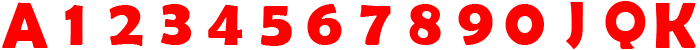
<style>
.page{position:relative;width:700px;height:50px;background:#ffffff}
.page>*{position:absolute;margin:0}
.t1{font:65.9px "BerlinSansFBDemi-Bold";color:#ff0000}
.t2{font:59.2px "BerlinSansFBDemi-Bold";color:#ff0000}
.t3{font:58.3px "BerlinSansFBDemi-Bold";color:#ff0000}
</style>
<div class="page">
<p class="t1" style="left:2px;top:2px;width:46px;height:47px">A</p>
<p class="t1" style="left:65px;top:5px;width:18px;height:40px">1</p>
<p class="t1" style="left:109px;top:5px;width:34px;height:41px">2</p>
<p class="t1" style="left:161px;top:4px;width:31px;height:41px">3</p>
<p class="t1" style="left:208px;top:4px;width:35px;height:41px">4</p>
<p class="t1" style="left:261px;top:6px;width:31px;height:40px">5</p>
<p class="t1" style="left:307px;top:4px;width:35px;height:41px">6</p>
<p class="t1" style="left:360px;top:5px;width:31px;height:40px">7</p>
<p class="t1" style="left:409px;top:4px;width:32px;height:41px">8</p>
<p class="t1" style="left:458px;top:4px;width:35px;height:41px">9</p>
<p class="t1" style="left:505px;top:4px;width:39px;height:41px">0</p>
<p class="t2" style="left:566px;top:2px;width:17px;height:47px">J</p>
<p class="t3" style="left:605px;top:1px;width:41px;height:48px">Q</p>
<p class="t1" style="left:655px;top:3px;width:41px;height:46px">K</p>
</div>
